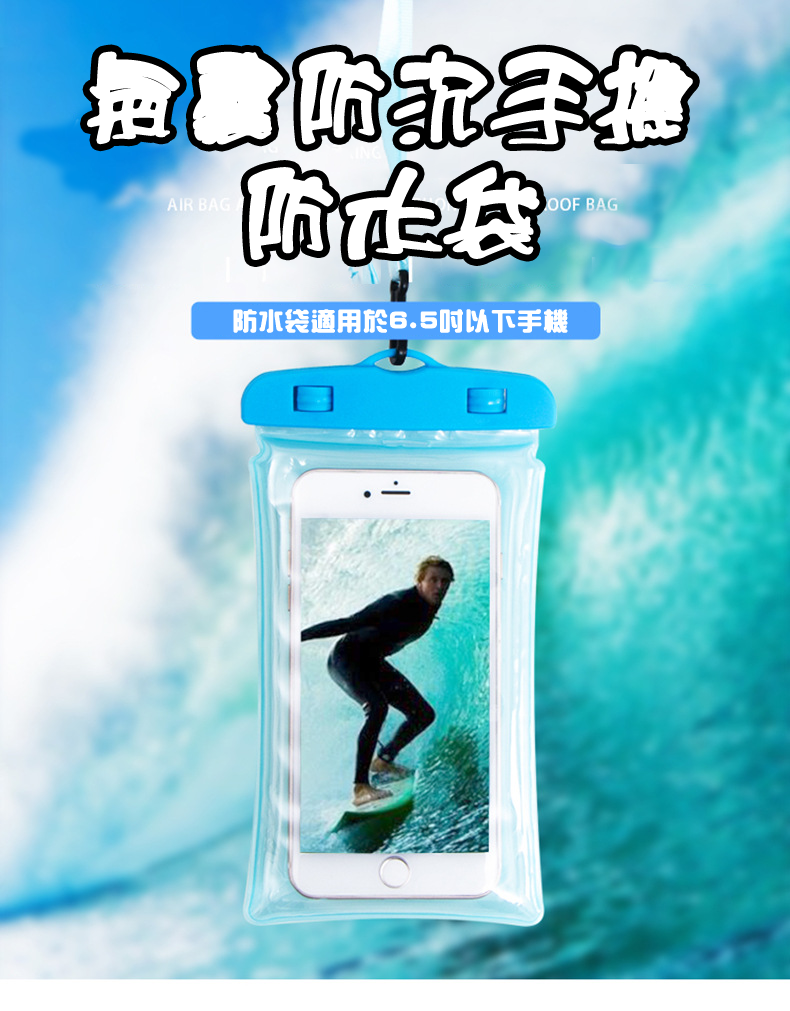
<style>
.page{position:relative;width:790px;height:1011px}
.page>*{position:absolute;margin:0}
.t1{font:100px "HanWangCC15";letter-spacing:-0.01em;color:#ffffff;font-weight:bold}
.t2{font:24px "HanWangZonYi";letter-spacing:0.05em;color:#ffffff;font-weight:bold}
</style>
<div class="page">
<p class="t1" style="left:87px;top:51px;width:606px;height:209px;text-align:center">氣囊防沉手機<br>防水袋</p>
<p class="t2" style="left:233px;top:309px;width:335px;height:24px">防水袋適用於6.5吋以下手機</p>
</div>
